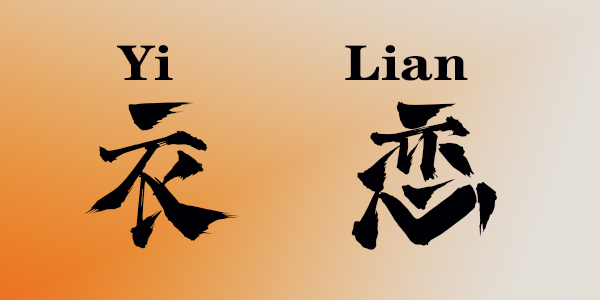
<style>
.page{position:relative;width:600px;height:300px}
.page>*{position:absolute;margin:0}
.t1{font:49.9px "FZCHSJW--GB1-0";letter-spacing:0.007em;color:#010105;scale:1.17 1}
.t2{font:171.5px "SSJiFengShuFaTi";letter-spacing:0.007em;color:#010105}
</style>
<div class="page">
<p class="t1" style="left:117px;top:45px;width:351px;height:36px">Yi          Lian</p>
<p class="t2" style="left:84px;top:101px;width:414px;height:149px">衣 恋</p>
</div>
